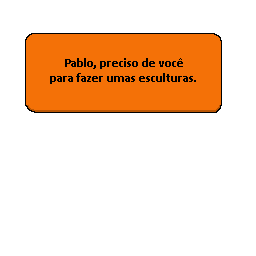
<style>
.page{position:relative;width:256px;height:256px;background:#ffffff}
.page>*{position:absolute;margin:0}
.t1{font:12.5px "Calibri-Bold";color:#000000}
</style>
<div class="page">
<p class="t1" style="left:50px;top:58px;width:146px;height:26px;text-align:center">Pablo, preciso de você<br>para fazer umas esculturas.</p>
</div>
